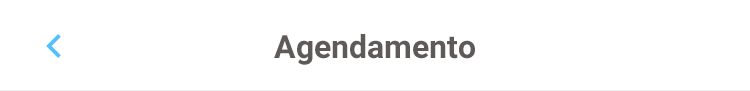
<style>
.page{position:relative;width:750px;height:91px;background:#ffffff}
.page>*{position:absolute;margin:0}
.t1{font:32px "Roboto-Bold";color:#5d5a58}
</style>
<div class="page">
<p class="t1" style="left:274px;top:34px;width:201px;height:31px">Agendamento</p>
</div>
